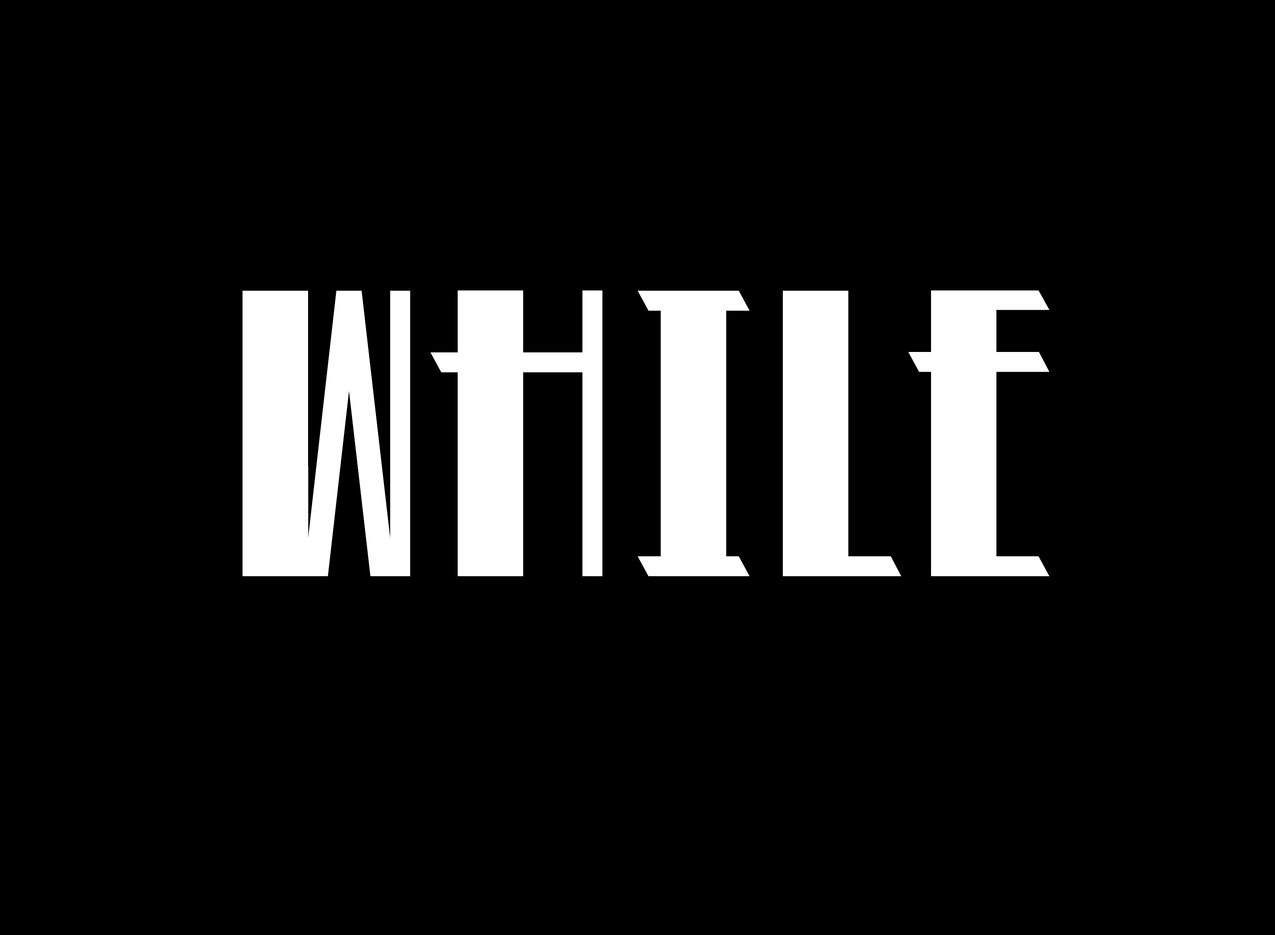
<style>
.page{position:relative;width:1275px;height:935px;background:#000000}
.page>*{position:absolute;margin:0}
.t1{font:356.1px "BettyNoir";color:#ffffff}
</style>
<div class="page">
<p class="t1" style="left:242px;top:291px;width:807px;height:285px">WHILE</p>
</div>
